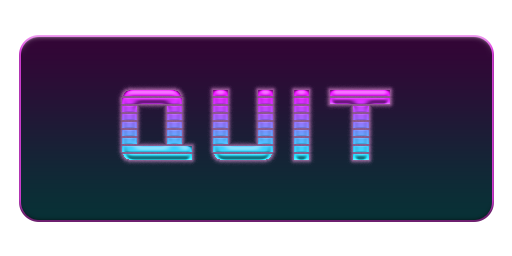
<style>
.page{position:relative;width:512px;height:256px;background:#ffffff}
.page>*{position:absolute;margin:0}
.t1{font:100px "AlienEncounters";letter-spacing:0.15em}
</style>
<div class="page">
<p class="t1" style="left:122px;top:90px;width:268px;height:70px">QUIT</p>
</div>
